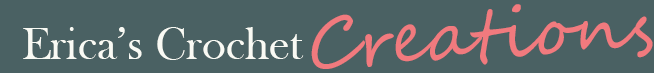
<style>
.page{position:relative;width:654px;height:73px;background:#4a6163}
.page>*{position:absolute;margin:0}
.t1{font:69px "SegoeScript";color:#f17a7e}
.t2{font:46px "BaskOldFace";color:#f9faf4}
</style>
<div class="page">
<p class="t1" style="left:311px;top:4px;width:342px;height:65px;rotate:-3deg">Creations</p>
<p class="t2" style="left:23px;top:27px;width:281px;height:33px">Erica’s Crochet</p>
</div>
